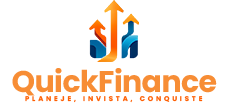
<style>
.page{position:relative;width:228px;height:104px;background:#ffffff}
.page>*{position:absolute;margin:0}
.t1{font:30px "Poppins-Bold";letter-spacing:-0.02em;color:#f78d35}
.t2{font:6.8px "Poppins-Bold";letter-spacing:0.42em;color:#fe5e01;text-transform:uppercase}
</style>
<div class="page">
<p class="t1" style="left:12px;top:68px;width:205px;height:28px">QuickFinance</p>
<p class="t2" style="left:25px;top:96px;width:178px;height:7px">Planeje, invista, conquiste</p>
</div>
